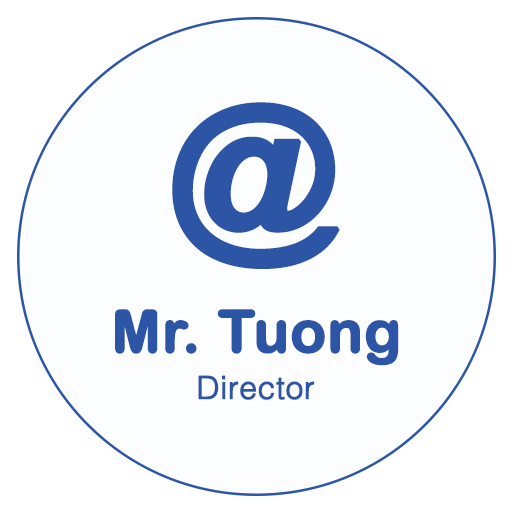
<style>
.page{position:relative;width:512px;height:512px;background:#fcfdff}
.page>*{position:absolute;margin:0}
.t1{font:172.4px "ArialRoundedMTBold";color:#2c55a5;font-weight:bold}
.t2{font:58.6px "ArialRoundedMTBold";color:#2c55a5;font-weight:bold}
.t3{font:31.5px "Helvetica-Light";color:#2c55a5;font-weight:bold}
</style>
<div class="page">
<p class="t1" style="left:172px;top:102px;width:168px;height:167px">@</p>
<p class="t2" style="left:115px;top:309px;width:284px;height:57px">Mr. Tuong</p>
<p class="t3" style="left:198px;top:375px;width:117px;height:25px">Director</p>
</div>
